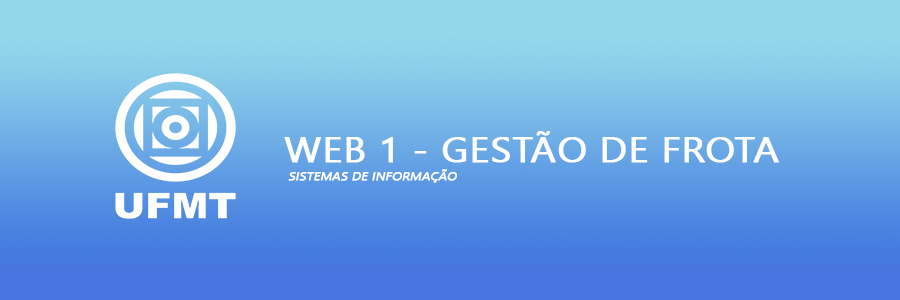
<style>
.page{position:relative;width:900px;height:300px}
.page>*{position:absolute;margin:0}
.t1{font:35.4px "SegoeUISymbol";color:#ffffff;text-transform:uppercase;font-weight:bold;scale:1.11 1}
.t2{font:11.5px "SegoeUISymbol";color:#ffffff;text-transform:uppercase;font-weight:bold;font-style:italic;scale:1.11 1}
</style>
<div class="page">
<p class="t1" style="left:284px;top:131px;width:495px;height:32px">Web 1 - GESTÃO DE FROTA</p>
<p class="t2" style="left:288px;top:169px;width:169px;height:14px">sISTEMAS DE INFORMAÇÃO</p>
</div>
